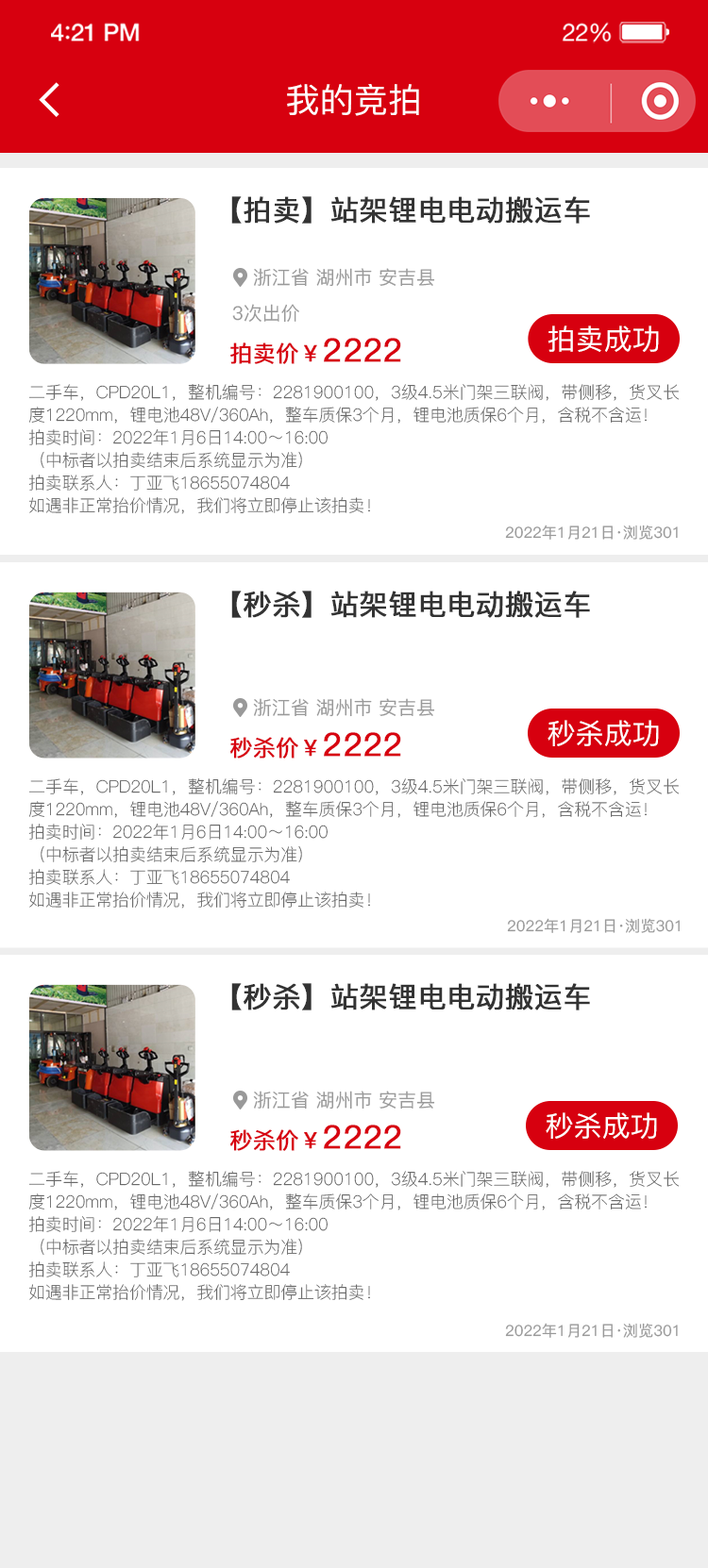
<style>
.page{position:relative;width:708px;height:1568px;background:#ffffff}
.page>*{position:absolute;margin:0}
.t1{font:34.1px "PingFang-SC-Medium";color:#ffffff}
.t2{font:28.3px "PingFang-SC-Medium";color:#333333;font-weight:bold}
.t3{font:18.9px "PingFang-SC-Medium";color:#999999}
.t4{font:28.3px "PingFang-SC-Medium";color:#ffffff}
.t5{font:22.6px "PingFang-SC-Medium";color:#d7000f;font-weight:bold}
.t6{font:32.1px "PingFang-SC-Medium";color:#d7000f;font-weight:bold}
.t7{font:17px/22.6px "PingFang-SC-Light";letter-spacing:-0.01em;color:#5b5b5b}
.t8{font:15.1px "PingFang-SC-Medium";color:#999999}
</style>
<div class="page">
<p class="t1" style="left:287px;top:84px;width:132px;height:32px">我的竞拍</p>
<p class="t2" style="left:231px;top:196px;width:359px;height:28px">【拍卖】站架锂电电动搬运车</p>
<p class="t3" style="left:253px;top:268px;width:182px;height:19px">浙江省 湖州市 安吉县</p>
<p class="t3" style="left:232px;top:304px;width:67px;height:19px">3次出价</p>
<p class="t4" style="left:547px;top:325px;width:112px;height:27px">拍卖成功</p>
<p class="t5" style="left:230px;top:338px;width:171px;height:26px">拍卖价￥<span class="t6">2222</span></p>
<p class="t7" style="left:28px;top:384px;width:650px;height:130px;text-align:justify">二手车，CPD20L1，整机编号：2281900100，3级4.5米门架三联阀，带侧移，货叉长度1220mm，锂电池48V/360Ah，整车质保3个月，锂电池质保6个月，含税不含运！<br>拍卖时间：2022年1月6日14:00～16:00<br>（中标者以拍卖结束后系统显示为准）<br>拍卖联系人：丁亚飞18655074804<br>如遇非正常抬价情况，我们将立即停止该拍卖！</p>
<p class="t8" style="left:505px;top:525px;width:172px;height:15px">2022年1月21日·浏览301</p>
<p class="t2" style="left:231px;top:591px;width:359px;height:27px">【秒杀】站架锂电电动搬运车</p>
<p class="t3" style="left:253px;top:698px;width:182px;height:19px">浙江省 湖州市 安吉县</p>
<p class="t4" style="left:547px;top:720px;width:112px;height:26px">秒杀成功</p>
<p class="t5" style="left:229px;top:732px;width:172px;height:27px">秒杀价￥<span class="t6">2222</span></p>
<p class="t7" style="left:28px;top:778px;width:650px;height:131px;text-align:justify">二手车，CPD20L1，整机编号：2281900100，3级4.5米门架三联阀，带侧移，货叉长度1220mm，锂电池48V/360Ah，整车质保3个月，锂电池质保6个月，含税不含运！<br>拍卖时间：2022年1月6日14:00～16:00<br>（中标者以拍卖结束后系统显示为准）<br>拍卖联系人：丁亚飞18655074804<br>如遇非正常抬价情况，我们将立即停止该拍卖！</p>
<p class="t8" style="left:507px;top:918px;width:172px;height:15px">2022年1月21日·浏览301</p>
<p class="t2" style="left:231px;top:983px;width:359px;height:27px">【秒杀】站架锂电电动搬运车</p>
<p class="t3" style="left:253px;top:1091px;width:182px;height:18px">浙江省 湖州市 安吉县</p>
<p class="t4" style="left:545px;top:1112px;width:112px;height:27px">秒杀成功</p>
<p class="t5" style="left:229px;top:1125px;width:172px;height:26px">秒杀价￥<span class="t6">2222</span></p>
<p class="t7" style="left:28px;top:1171px;width:650px;height:130px;text-align:justify">二手车，CPD20L1，整机编号：2281900100，3级4.5米门架三联阀，带侧移，货叉长度1220mm，锂电池48V/360Ah，整车质保3个月，锂电池质保6个月，含税不含运！<br>拍卖时间：2022年1月6日14:00～16:00<br>（中标者以拍卖结束后系统显示为准）<br>拍卖联系人：丁亚飞18655074804<br>如遇非正常抬价情况，我们将立即停止该拍卖！</p>
<p class="t8" style="left:505px;top:1323px;width:172px;height:15px">2022年1月21日·浏览301</p>
</div>
